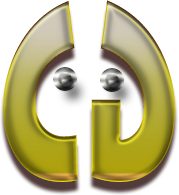
<style>
.page{position:relative;width:179px;height:195px;background:#ffffff}
.page>*{position:absolute;margin:0}
.t1{font:243.5px "LithosPro-Black";scale:0.54 1}
</style>
<div class="page">
<p class="t1" style="left:3px;top:1px;width:75px;height:181px">C</p>
<p class="t1" style="left:91px;top:0px;width:85px;height:182px;rotate:180deg">G</p>
</div>
